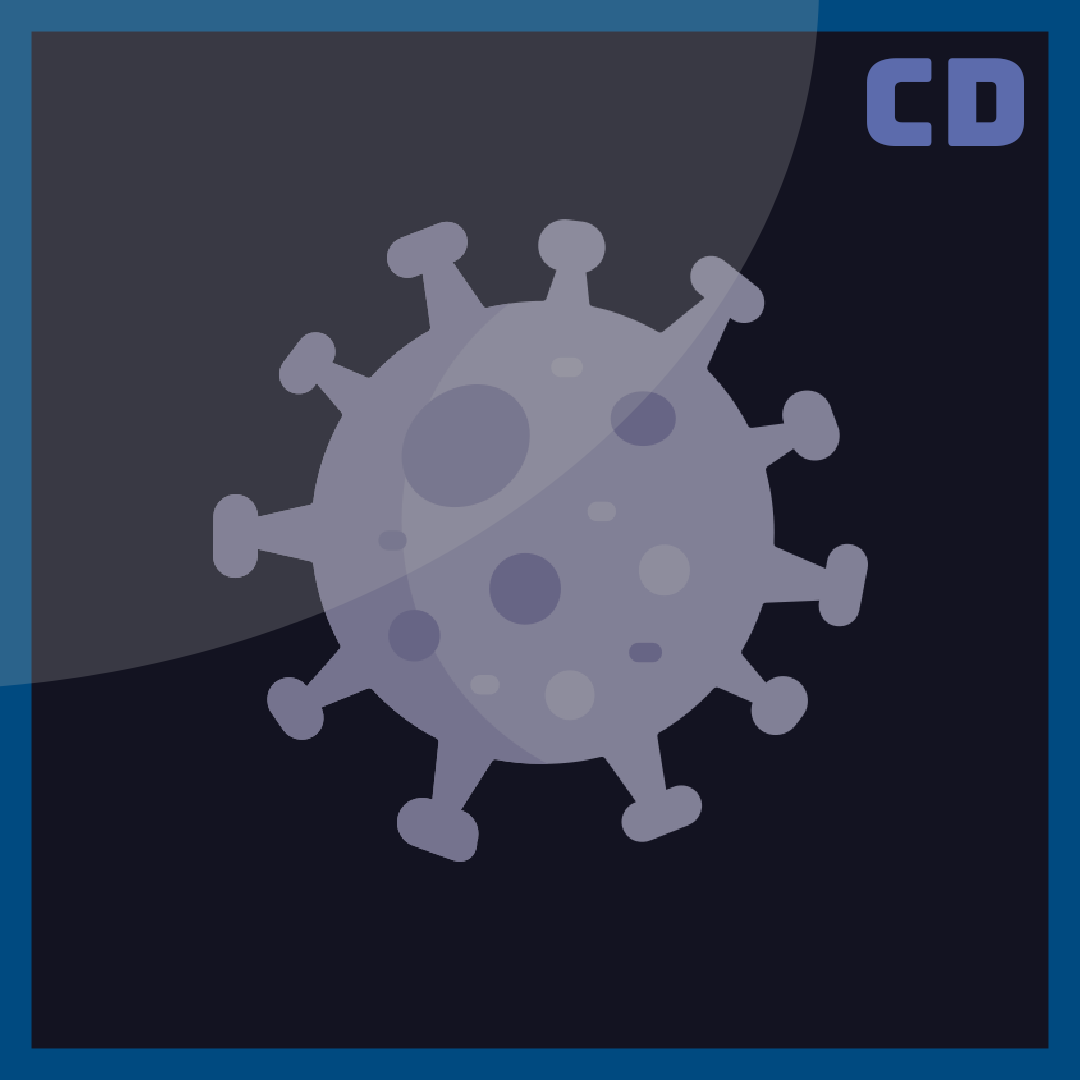
<style>
.page{position:relative;width:1080px;height:1080px;background:#131321}
.page>*{position:absolute;margin:0}
.t1{font:121.6px "Bungee-Regular";letter-spacing:0.025em;color:#5c6bac}
</style>
<div class="page">
<p class="t1" style="left:867px;top:58px;width:157px;height:88px">CD</p>
</div>
